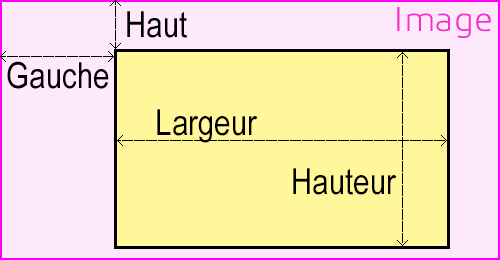
<style>
.page{position:relative;width:500px;height:260px;background:#fde8fc}
.page>*{position:absolute;margin:0}
.t1{font:36px "ArialNarrow";color:#000000}
.t2{font:36px "3ds-Light";color:#f22ec6}
</style>
<div class="page">
<p class="t1" style="left:127px;top:11px;width:60px;height:27px">Haut</p>
<p class="t2" style="left:397px;top:7px;width:94px;height:31px">Image</p>
<p class="t1" style="left:7px;top:61px;width:102px;height:28px">Gauche</p>
<p class="t1" style="left:157px;top:109px;width:101px;height:34px">Largeur</p>
<p class="t1" style="left:293px;top:168px;width:104px;height:27px">Hauteur</p>
</div>
